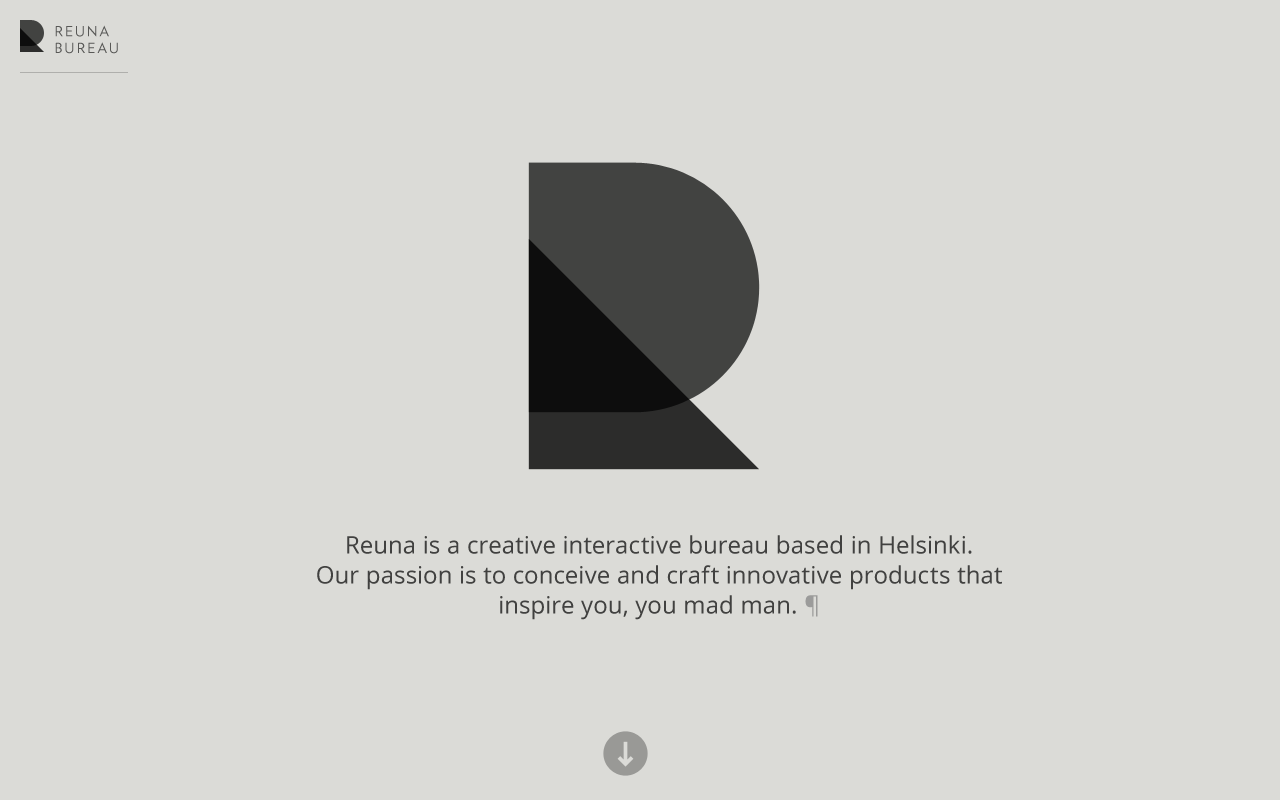
<style>
.page{position:relative;width:1280px;height:800px;background:#dbdbd7}
.page>*{position:absolute;margin:0}
.t1{font:14px "Verlag-Book";letter-spacing:0.15em;color:#585856}
.t2{font:24px/30px "OpenSans";letter-spacing:0.01em;color:#414140}
</style>
<div class="page">
<p class="t1" style="left:55px;top:25px;width:63px;height:29px">REUNA<br>BUREAU</p>
<p class="t2" style="left:317px;top:535px;width:685px;height:85px;text-align:center">Reuna is a creative interactive bureau based in Helsinki. <br>Our passion is to conceive and craft innovative products that inspire you, you mad man. ¶</p>
</div>
